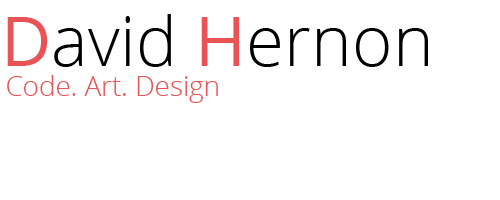
<style>
.page{position:relative;width:500px;height:200px;background:#ffffff}
.page>*{position:absolute;margin:0}
.t1{font:69.4px "OpenSans-Light";color:#000000}
.t2{font:69.4px "OpenSans";color:#e85356}
.t3{font:27.8px "OpenSans-Light";color:#e85356}
</style>
<div class="page">
<p class="t1" style="left:7px;top:14px;width:421px;height:53px"><span class="t2">D</span>avid <span class="t2">H</span>ernon</p>
<p class="t3" style="left:7px;top:75px;width:211px;height:28px">Code. Art. Design</p>
</div>
